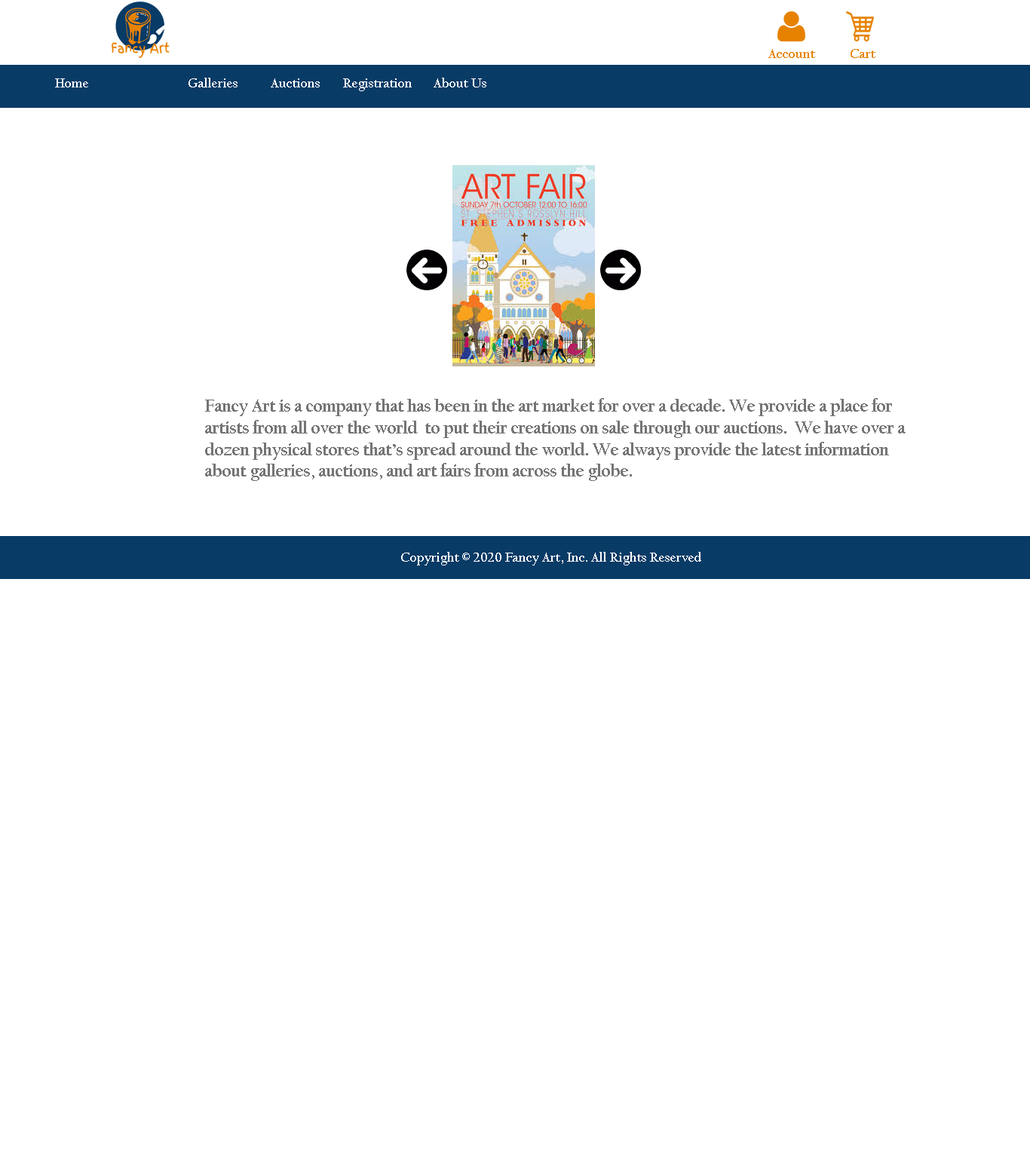
<style>
.page{position:relative;width:1030px;height:1158px;background:#ffffff}
.page>*{position:absolute;margin:0}
.t1{font:13.6px "CalifornianFB-Bold";color:#e78200}
.t2{font:13.6px "CalifornianFB-Bold";color:#ffffff}
.t3{font:18.1px "CalifornianFB-Bold";color:#757474}
</style>
<div class="page">
<p class="t1" style="left:768px;top:49px;width:47px;height:9px">Account</p>
<p class="t1" style="left:850px;top:49px;width:25px;height:9px">Cart</p>
<p class="t2" style="left:188px;top:78px;width:49px;height:9px">Galleries</p>
<p class="t2" style="left:433px;top:78px;width:53px;height:9px">About Us</p>
<p class="t2" style="left:55px;top:78px;width:33px;height:9px">Home</p>
<p class="t2" style="left:271px;top:78px;width:49px;height:9px">Auctions</p>
<p class="t2" style="left:343px;top:78px;width:69px;height:13px">Registration</p>
<p class="t3" style="left:205px;top:398px;width:700px;height:83px">Fancy Art is a company that has been in the art market for over a decade. We provide a place for artists from all over the world  to put their creations on sale through our auctions.  We have over a dozen physical stores that’s spread around the world. We always provide the latest information about galleries, auctions, and art fairs from across the globe.</p>
<p class="t2" style="left:401px;top:552px;width:300px;height:13px">Copyright © 2020 Fancy Art, Inc. All Rights Reserved</p>
</div>
